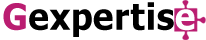
<style>
.page{position:relative;width:206px;height:40px;background:#ffffff}
.page>*{position:absolute;margin:0}
.t1{font:36.2px "Tahoma-Bold";letter-spacing:0.04em;color:#000000;scale:0.94 1}
.t2{font:36.2px "Tahoma-Bold";letter-spacing:0.04em;color:#ba1d71;scale:0.94 1}
.t3{font:36.2px "Tahoma-Bold";letter-spacing:0.04em;color:#fdfdfe;scale:0.94 1}
</style>
<div class="page">
<p class="t1" style="left:3px;top:2px;width:192px;height:35px"><span class="t2">G</span>expertis<span class="t3">e</span></p>
</div>
